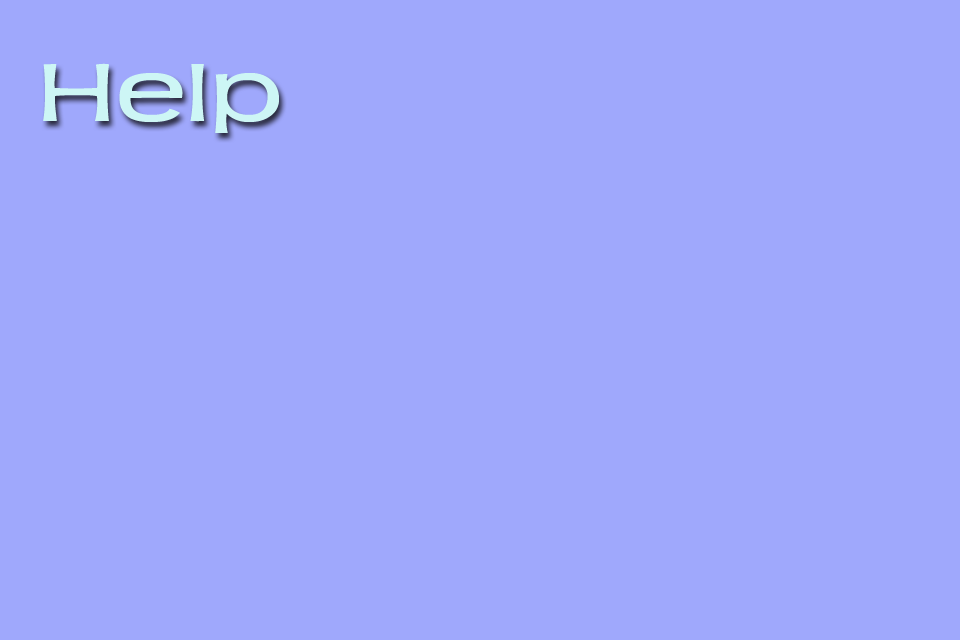
<style>
.page{position:relative;width:960px;height:640px;background:#9fa8fc}
.page>*{position:absolute;margin:0}
.t1{font:89.6px "Teen";color:#cdf6f5;scale:1.43 1}
</style>
<div class="page">
<p class="t1" style="left:43px;top:63px;width:236px;height:70px">Help</p>
</div>
